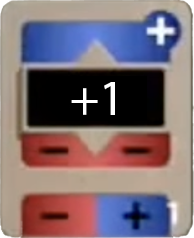
<style>
.page{position:relative;width:194px;height:238px}
.page>*{position:absolute;margin:0}
.t1{font:50px "MyriadPro-Regular";color:#ffffff}
</style>
<div class="page">
<p class="t1" style="left:71px;top:82px;width:44px;height:33px">+1</p>
</div>
